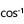
<style>
.page{position:relative;width:24px;height:24px;background:#ffffff}
.page>*{position:absolute;margin:0}
.t1{font:12px "SegoeUI";color:#000000}
</style>
<div class="page">
<p class="t1" style="left:0px;top:7px;width:23px;height:11px">cos-1</p>
</div>
